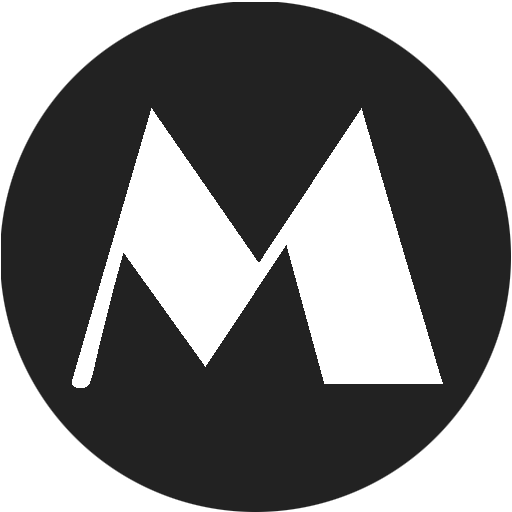
<style>
.page{position:relative;width:512px;height:512px;background:#222222}
.page>*{position:absolute;margin:0}
.t1{font:400px "Broadway";color:#ffffff}
</style>
<div class="page">
<p class="t1" style="left:72px;top:108px;width:371px;height:280px">M</p>
</div>
